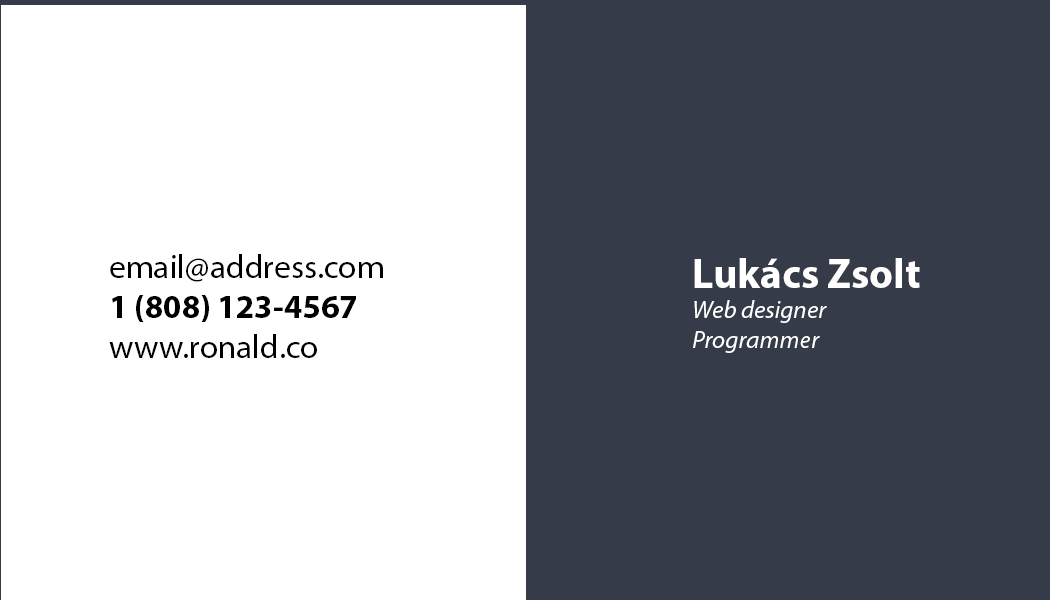
<style>
.page{position:relative;width:1050px;height:600px;background:#353b48}
.page>*{position:absolute;margin:0}
.t1{font:33.3px "MyriadPro-Regular";color:#000000}
.t2{font:33.3px "MyriadPro-Bold";color:#000000}
.t3{font:25px "MyriadPro-It";color:#ffffff}
.t4{font:41.7px "MyriadPro-Bold";color:#ffffff}
</style>
<div class="page">
<p class="t1" style="left:109px;top:254px;width:274px;height:104px">email@address.com<br><span class="t2">1 (808) 123-4567<br></span>www.ronald.co</p>
<p class="t3" style="left:693px;top:258px;width:227px;height:95px"><span class="t4">Lukács Zsolt<br></span>Web designer <br>Programmer</p>
</div>
